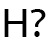
<style>
.page{position:relative;width:48px;height:48px;background:#ffffff}
.page>*{position:absolute;margin:0}
.t1{font:41.1px "Ubuntu";color:#000000}
</style>
<div class="page">
<p class="t1" style="left:4px;top:9px;width:42px;height:28px">H?</p>
</div>
